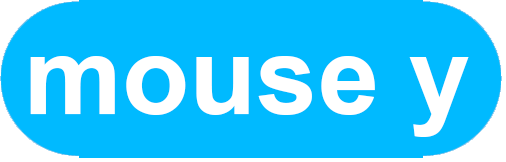
<style>
.page{position:relative;width:506px;height:162px;background:#00baff}
.page>*{position:absolute;margin:0}
.t1{font:110px "Arial-BoldMT";color:#ffffff}
</style>
<div class="page">
<p class="t1" style="left:30px;top:56px;width:439px;height:81px">mouse y</p>
</div>
